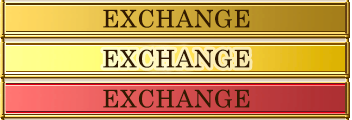
<style>
.page{position:relative;width:352px;height:120px}
.page>*{position:absolute;margin:0}
.t1{font:24px "CenturySchoolbook";letter-spacing:0.025em;color:#321a02}
</style>
<div class="page">
<p class="t1" style="left:103px;top:9px;width:147px;height:19px">EXCHANGE</p>
<p class="t1" style="left:103px;top:49px;width:147px;height:19px">EXCHANGE</p>
<p class="t1" style="left:103px;top:89px;width:147px;height:19px">EXCHANGE</p>
</div>
